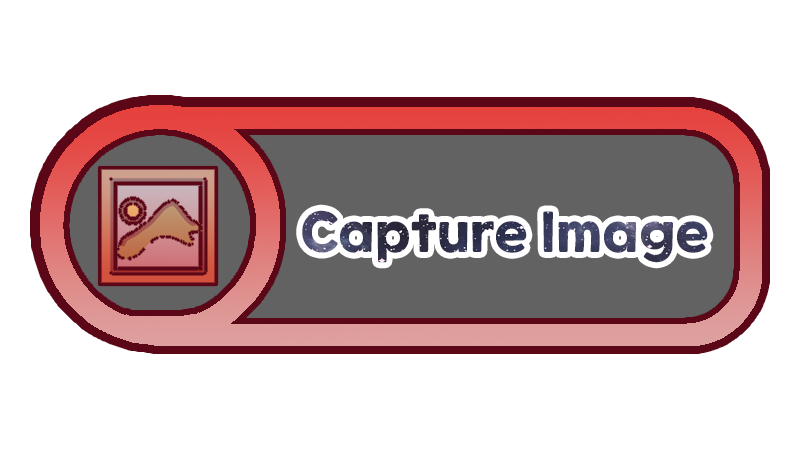
<style>
.page{position:relative;width:800px;height:450px;background:#ffffff}
.page>*{position:absolute;margin:0}
.t1{font:54px "ONEMobilePOPOTFRegular"}
</style>
<div class="page">
<p class="t1" style="left:302px;top:210px;width:406px;height:53px">Capture Image</p>
</div>
